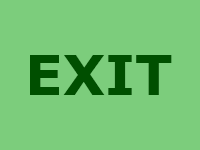
<style>
.page{position:relative;width:200px;height:150px;background:#7ccd7c}
.page>*{position:absolute;margin:0}
.t1{font:55px "Verdana-Bold";color:#004f00}
</style>
<div class="page">
<p class="t1" style="left:30px;top:55px;width:142px;height:40px">EXIT</p>
</div>
